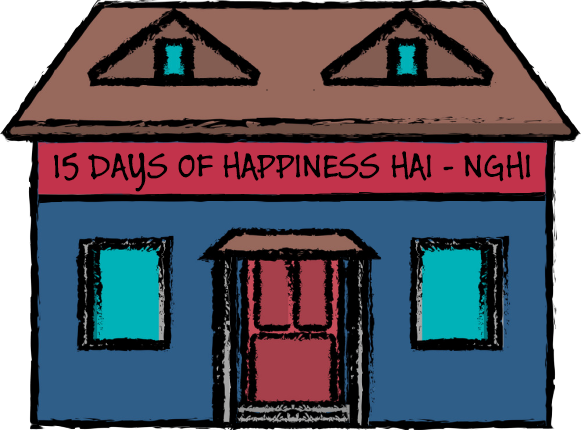
<style>
.page{position:relative;width:581px;height:430px;background:#2f5e88}
.page>*{position:absolute;margin:0}
.t1{font:38px "BuxtonSketch";color:#000000}
</style>
<div class="page">
<p class="t1" style="left:54px;top:151px;width:477px;height:41px">15 DAYS OF HAPPINESS HAI - NGHI</p>
</div>
